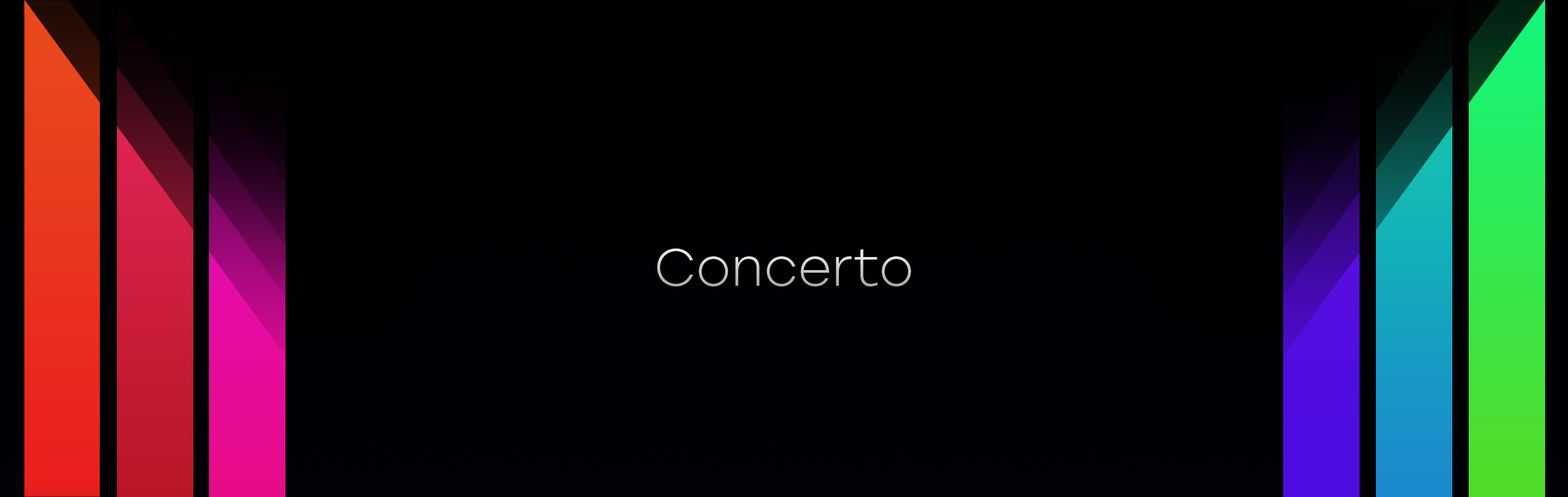
<style>
.page{position:relative;width:1568px;height:497px}
.page>*{position:absolute;margin:0}
.t1{font:51.9px "Stolzl-Light";letter-spacing:0.005em}
</style>
<div class="page">
<p class="t1" style="left:657px;top:248px;width:254px;height:38px">Concerto</p>
</div>
